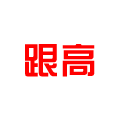
<style>
.page{position:relative;width:120px;height:120px;background:#ffffff}
.page>*{position:absolute;margin:0}
.t1{font:36px "ç»å¸ç»¼èºä½ç®-regular";letter-spacing:0.05em;color:#ff0000}
</style>
<div class="page">
<p class="t1" style="left:25px;top:44px;width:70px;height:33px">跟高</p>
</div>
